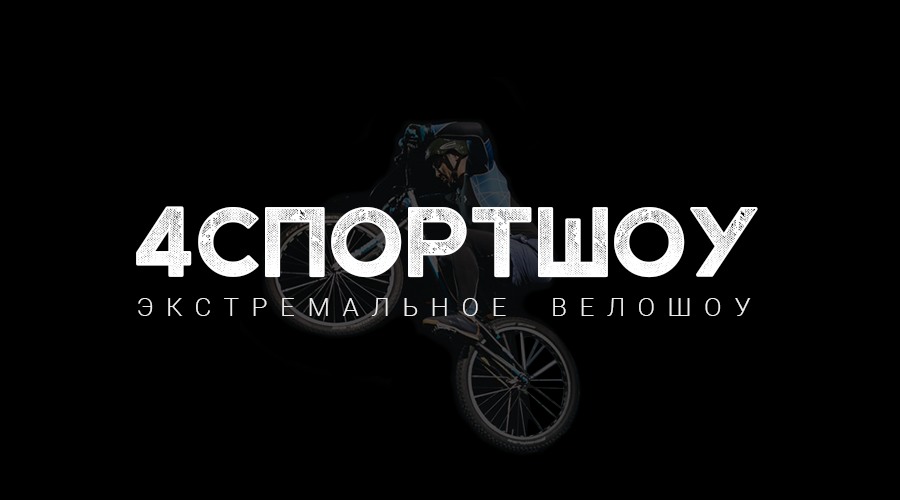
<style>
.page{position:relative;width:900px;height:500px;background:#000000}
.page>*{position:absolute;margin:0}
.t1{font:140px "StampborGrungeRussian";color:#ffffff}
.t2{font:26px "Roboto-Light";letter-spacing:0.48em;color:#ececec;text-transform:uppercase}
</style>
<div class="page">
<p class="t1" style="left:136px;top:206px;width:622px;height:72px">4спортшоу</p>
<p class="t2" style="left:138px;top:298px;width:368px;height:18px">Экстремальное</p>
<p class="t2" style="left:553px;top:298px;width:198px;height:18px">Велошоу</p>
</div>
